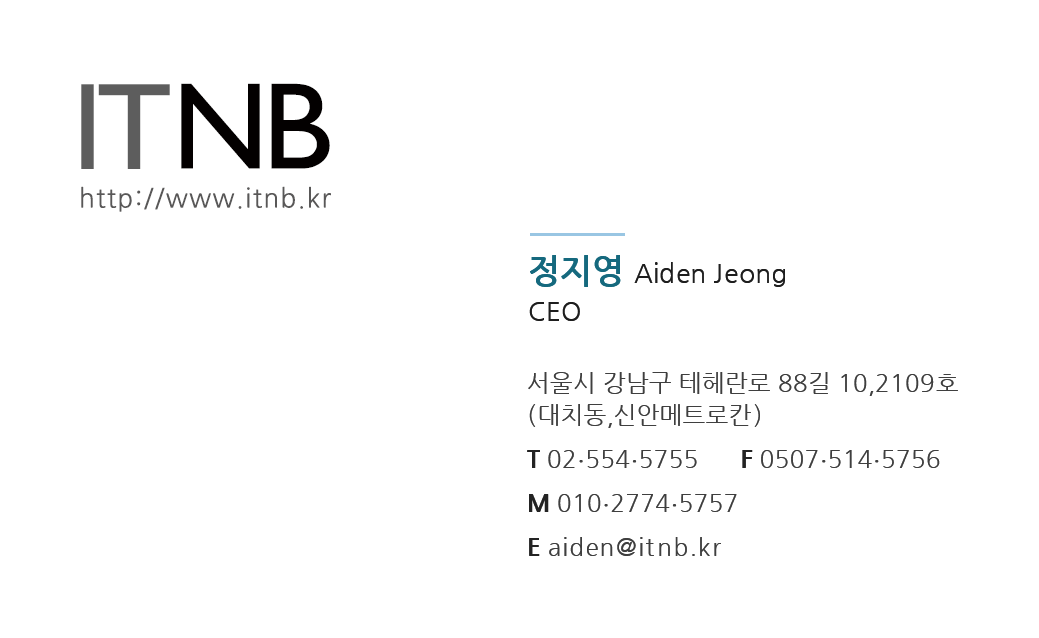
<style>
.page{position:relative;width:1039px;height:638px;background:#ffffff}
.page>*{position:absolute;margin:0}
.t1{font:124px "GillSansMT";letter-spacing:-0.05em;color:#5d5d5d;text-transform:uppercase}
.t2{font:124px "GillSansMT";letter-spacing:-0.05em;color:#030000;text-transform:uppercase}
.t3{font:26px "NanumGothic";letter-spacing:0.05em;color:#595858}
.t4{font:26px/38px "NanumGothic";color:#1e1e1e}
.t5{font:11px/38px "NanumGothic";color:#3f3f3f}
.t6{font:34px/38px "NanumGothicBold";color:#15697e}
.t7{font:24px/44px "NanumGothic";color:#3f3f3f}
.t8{font:24px/32px "NanumGothic";color:#3f3f3f}
.t9{font:24px/44px "NanumGothicExtraBold";color:#232323}
.t10{font:24px/44px "NanumGothic";color:#3f3f3f;font-weight:bold}
.t11{font:24px/44px "NanumGothic";letter-spacing:0.05em;color:#3f3f3f}
</style>
<div class="page">
<p class="t1" style="left:81px;top:83px;width:249px;height:86px">IT<span class="t2">Nb</span></p>
<p class="t3" style="left:81px;top:186px;width:250px;height:26px">http://www.itnb.kr</p>
<p class="t4" style="left:529px;top:255px;width:256px;height:66px"><span class="t5"><br></span><span class="t6">정지영 </span>Aiden Jeong<br>CEO</p>
<p class="t7" style="left:527px;top:372px;width:431px;height:184px">서울시 강남구 테헤란로 88길 10,2109호<br><span class="t8">(대치동,신안메트로칸)<br></span><span class="t9">T </span>02<span class="t10">.</span>554<span class="t10">.</span>5755      <span class="t9">F</span> 0507<span class="t10">.</span>514<span class="t10">.</span>5756<br><span class="t9">M</span> 010<span class="t10">.</span>2774<span class="t10">.</span>5757<br><span class="t9">E </span><span class="t11">aiden@itnb.kr</span></p>
</div>
